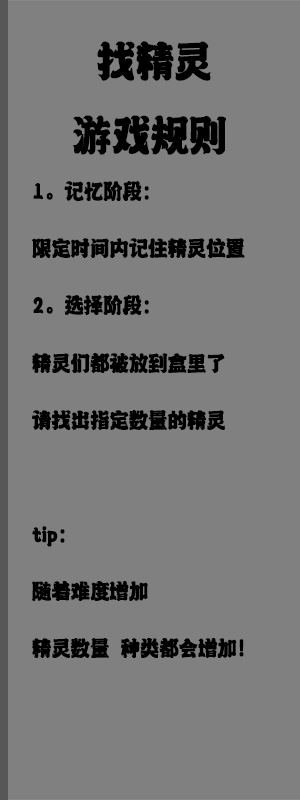
<style>
.page{position:relative;width:300px;height:800px;background:#808080}
.page>*{position:absolute;margin:0}
.t1{font:50px "-";letter-spacing:-0.02em;color:#000000;font-weight:bold;scale:0.88 1}
.t2{font:25px/57.1px "-";letter-spacing:-0.02em;color:#000000;font-weight:bold;scale:0.88 1}
</style>
<div class="page">
<p class="t1" style="left:97px;top:41px;width:114px;height:40px">找精灵</p>
<p class="t1" style="left:73px;top:115px;width:153px;height:40px">游戏规则</p>
<p class="t2" style="left:32px;top:181px;width:213px;height:477px">1。记忆阶段：<br>限定时间内记住精灵位置<br>2。选择阶段：<br>精灵们都被放到盒里了<br>请找出指定数量的精灵<br><br>tip：<br>随着难度增加<br>精灵数量 种类都会增加！</p>
</div>
